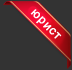
<style>
.page{position:relative;width:72px;height:70px;background:#333333}
.page>*{position:absolute;margin:0}
.t1{font:12px "ArialMT";letter-spacing:0.05em;color:#fffefe;font-weight:bold}
</style>
<div class="page">
<p class="t1" style="left:30px;top:9px;width:32px;height:30px;rotate:45deg">юрист</p>
</div>
